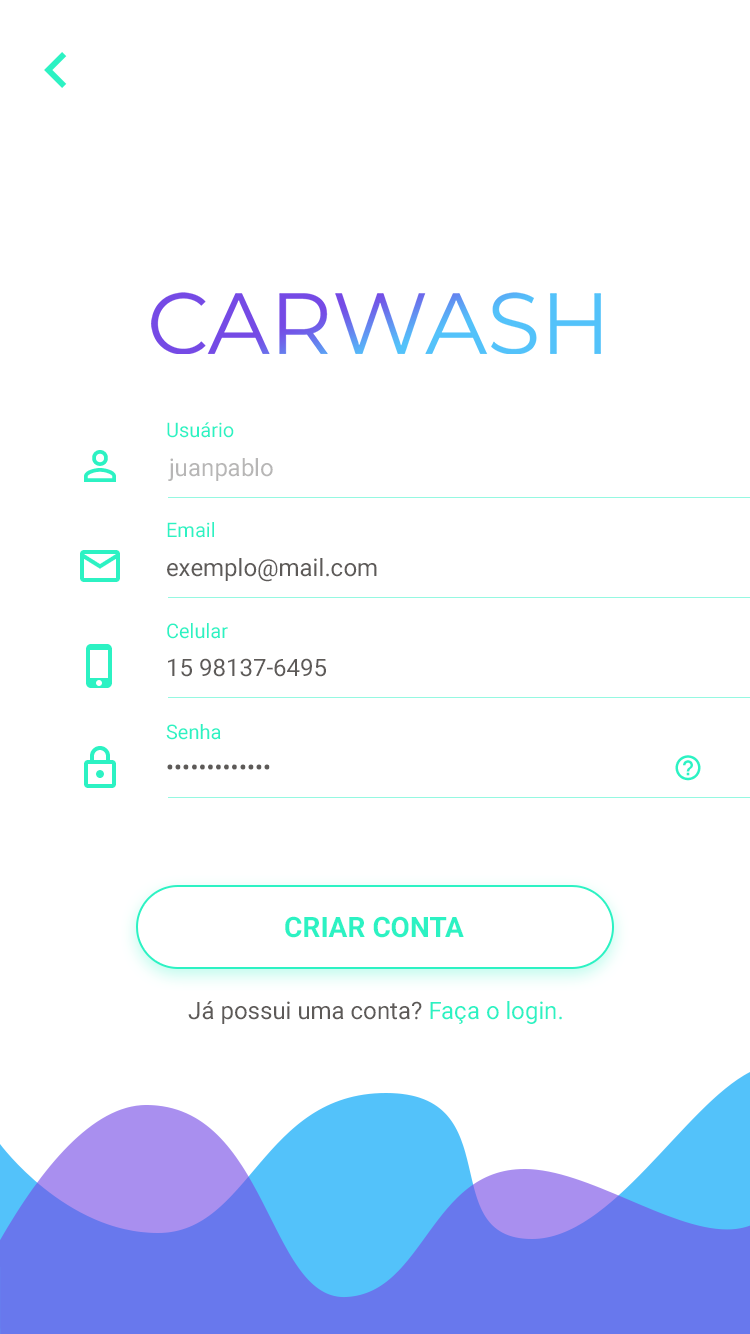
<style>
.page{position:relative;width:750px;height:1334px;background:#ffffff}
.page>*{position:absolute;margin:0}
.t1{font:20px "Roboto-Regular";color:#2cf2c3}
.t2{font:24px "Roboto-Regular";color:#b7b6b6}
.t3{font:24px "Roboto-Regular";color:#5d5a58}
.t4{font:28px "Roboto-Bold";color:#2cf2c3;text-transform:uppercase}
.t5{font:24px "Roboto-Regular";color:#2cf2c3}
</style>
<div class="page">
<p class="t1" style="left:167px;top:422px;width:67px;height:16px">Usuário</p>
<p class="t2" style="left:168px;top:458px;width:105px;height:23px">juanpablo</p>
<p class="t1" style="left:167px;top:522px;width:47px;height:16px">Email</p>
<p class="t3" style="left:167px;top:558px;width:210px;height:24px">exemplo@mail.com</p>
<p class="t1" style="left:167px;top:623px;width:61px;height:16px">Celular</p>
<p class="t3" style="left:168px;top:658px;width:158px;height:19px">15 98137-6495</p>
<p class="t1" style="left:166px;top:724px;width:55px;height:16px">Senha</p>
<p class="t3" style="left:167px;top:764px;width:103px;height:6px">•••••••••••••</p>
<p class="t4" style="left:285px;top:916px;width:179px;height:22px">CRIAR CONTA</p>
<p class="t3" style="left:188px;top:1001px;width:374px;height:23px">Já possui uma conta? <span class="t5">Faça o login.</span></p>
</div>
